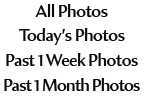
<style>
.page{position:relative;width:144px;height:96px;background:#ffffff}
.page>*{position:absolute;margin:0}
.t1{font:17.3px "AmiraParadiso";letter-spacing:-0.04em;color:#000000}
.t2{font:17.3px "AmiraParadiso";letter-spacing:-0.06em;color:#000000}
</style>
<div class="page">
<p class="t1" style="left:35px;top:4px;width:73px;height:13px;opacity:0.96">All Photos</p>
<p class="t1" style="left:18px;top:28px;width:107px;height:17px;opacity:0.96">Today’s Photos</p>
<p class="t1" style="left:6px;top:53px;width:132px;height:13px;opacity:0.96">Past 1 Week Photos</p>
<p class="t2" style="left:4px;top:78px;width:136px;height:13px;opacity:0.96">Past 1 Month Photos</p>
</div>
